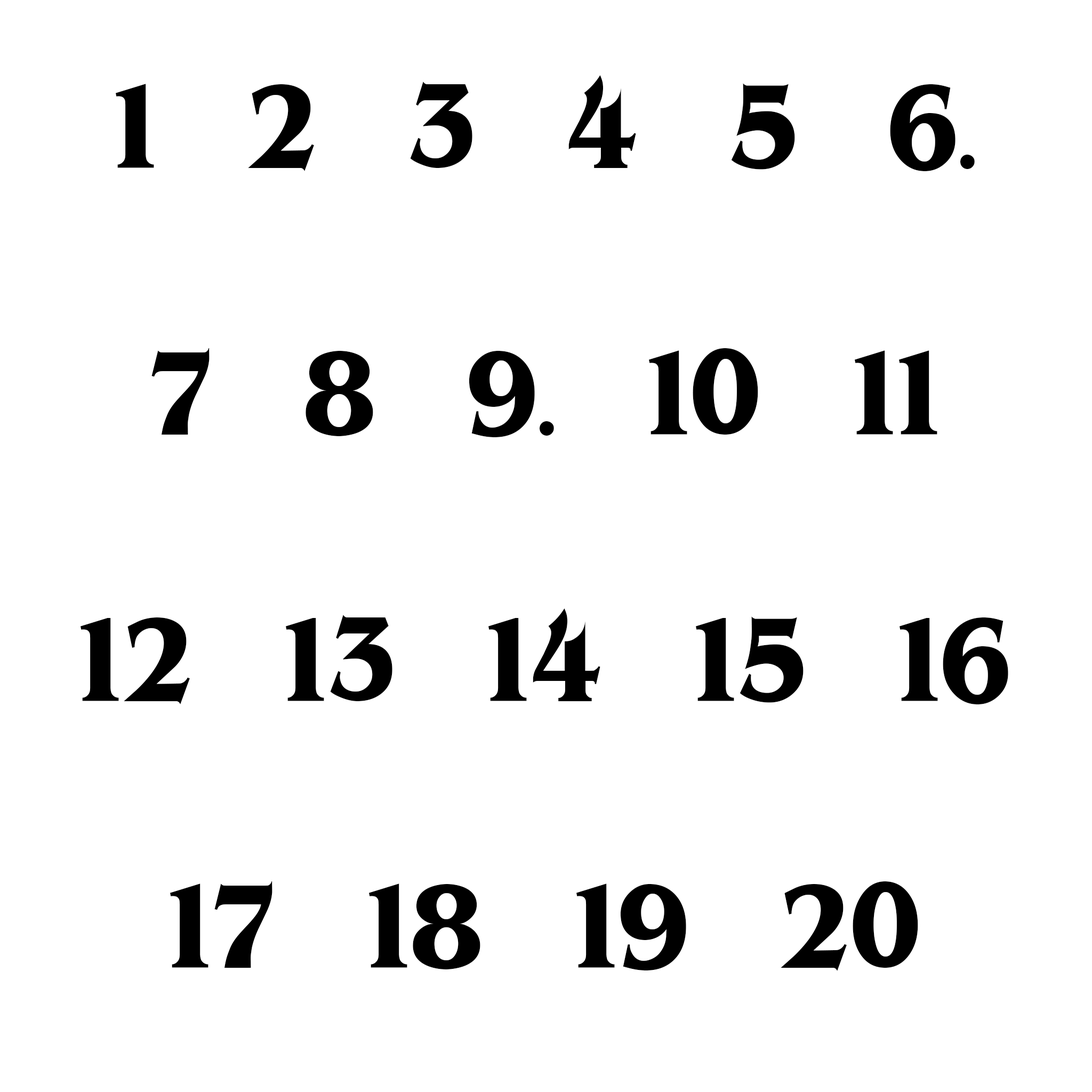
<style>
.page{position:relative;width:1092px;height:1092px;background:#ffffff}
.page>*{position:absolute;margin:0}
.t1{font:108.8px/266.6px "BenguiatBold";color:#000000;scale:0.87 1}
.t2{font:64px/266.6px "BenguiatBold";color:#000000;scale:0.87 1}
</style>
<div class="page">
<p class="t1" style="left:80px;top:75px;width:928px;height:896px;text-align:center">1   2   3   4   5   6<span class="t2">.</span>   7   8   9<span class="t2">.</span>   10   11   12   13   14   15   16   17   18   19   20</p>
</div>
